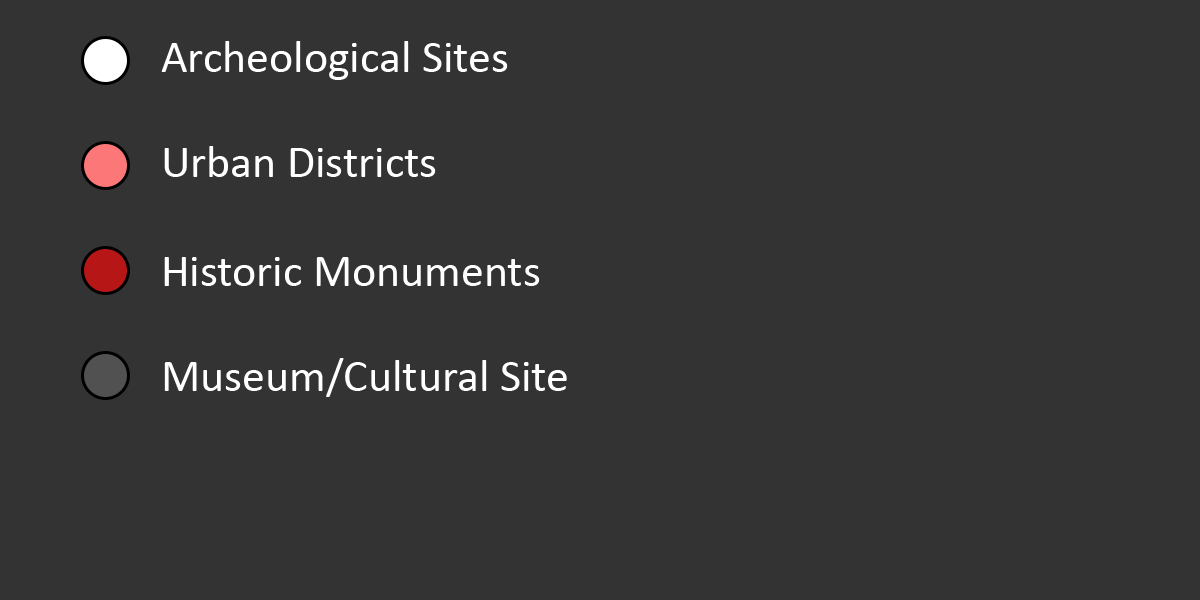
<style>
.page{position:relative;width:1200px;height:600px;background:#333333}
.page>*{position:absolute;margin:0}
.t1{font:45.8px "Calibri";color:#ffffff}
</style>
<div class="page">
<p class="t1" style="left:161px;top:41px;width:347px;height:39px">Archeological Sites</p>
<p class="t1" style="left:164px;top:146px;width:272px;height:31px">Urban Districts</p>
<p class="t1" style="left:164px;top:257px;width:376px;height:29px">Historic Monuments</p>
<p class="t1" style="left:164px;top:358px;width:403px;height:39px">Museum/Cultural Site</p>
</div>
